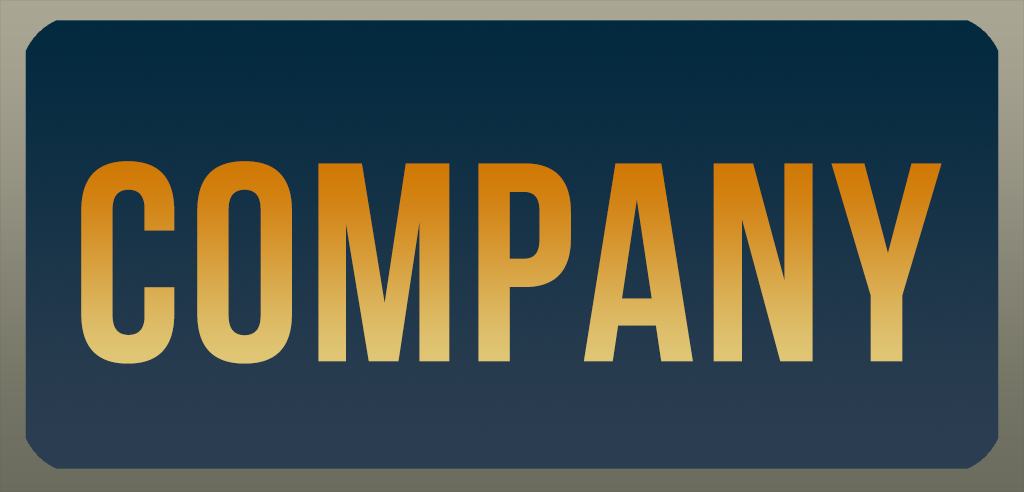
<style>
.page{position:relative;width:1024px;height:492px}
.page>*{position:absolute;margin:0}
.t1{font:282.3px "UTM-Bebas";letter-spacing:0.025em}
</style>
<div class="page">
<p class="t1" style="left:81px;top:161px;width:861px;height:203px">Company</p>
</div>
